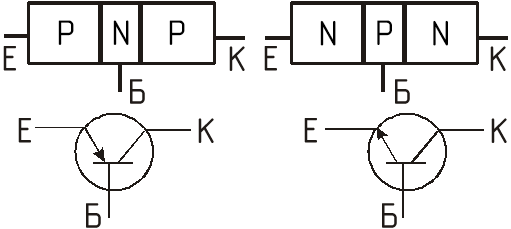
<style>
.page{position:relative;width:511px;height:229px;background:#ffffff}
.page>*{position:absolute;margin:0}
.t1{font:36px "GOST-2.304-81typeB";color:#000000}
.t2{font:36px "GOST-2.304-81typeB";color:#1f1a17}
</style>
<div class="page">
<p class="t1" style="left:58px;top:20px;width:16px;height:25px">P</p>
<p class="t1" style="left:113px;top:20px;width:16px;height:25px">N</p>
<p class="t1" style="left:169px;top:20px;width:16px;height:25px">P</p>
<p class="t1" style="left:320px;top:20px;width:16px;height:26px">N</p>
<p class="t1" style="left:377px;top:20px;width:15px;height:25px">P</p>
<p class="t1" style="left:433px;top:20px;width:15px;height:26px">N</p>
<p class="t2" style="left:3px;top:46px;width:13px;height:25px">Е</p>
<p class="t2" style="left:229px;top:46px;width:16px;height:25px">К</p>
<p class="t2" style="left:264px;top:46px;width:13px;height:25px">Е</p>
<p class="t2" style="left:490px;top:46px;width:16px;height:25px">К</p>
<p class="t2" style="left:130px;top:79px;width:15px;height:25px">Б</p>
<p class="t2" style="left:395px;top:79px;width:15px;height:25px">Б</p>
<p class="t2" style="left:18px;top:118px;width:13px;height:25px">Е</p>
<p class="t2" style="left:198px;top:118px;width:16px;height:25px">К</p>
<p class="t2" style="left:304px;top:118px;width:13px;height:25px">Е</p>
<p class="t2" style="left:491px;top:118px;width:16px;height:25px">К</p>
<p class="t2" style="left:86px;top:203px;width:15px;height:25px">Б</p>
<p class="t2" style="left:382px;top:203px;width:15px;height:25px">Б</p>
</div>
